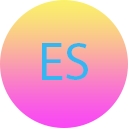
<style>
.page{position:relative;width:128px;height:128px;background:#ffffff}
.page>*{position:absolute;margin:0}
.t1{font:53.4px "MyriadPro-Regular";color:#36b6f1}
</style>
<div class="page">
<p class="t1" style="left:42px;top:43px;width:46px;height:37px">ES</p>
</div>
